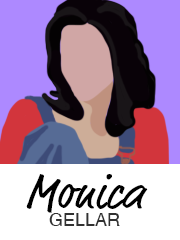
<style>
.page{position:relative;width:180px;height:240px;background:#ffffff}
.page>*{position:absolute;margin:0}
.t1{font:48px "MarketPro";color:#000000}
.t2{font:18px "Helvetica";color:#313131;text-transform:uppercase}
</style>
<div class="page">
<p class="t1" style="left:26px;top:174px;width:122px;height:39px">Monica</p>
<p class="t2" style="left:49px;top:213px;width:71px;height:13px">Gellar</p>
</div>
